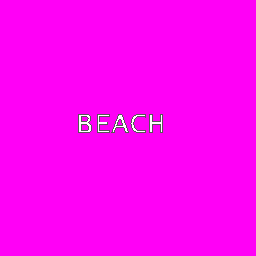
<style>
.page{position:relative;width:256px;height:256px;background:#ff00f6}
.page>*{position:absolute;margin:0}
.t1{font:30px "LucidaConsole";letter-spacing:0.02em;color:#ffffff;scale:0.95 1}
</style>
<div class="page">
<p class="t1" style="left:78px;top:114px;width:85px;height:19px">BEACH</p>
</div>
